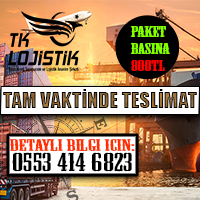
<style>
.page{position:relative;width:200px;height:200px}
.page>*{position:absolute;margin:0}
.t1{font:14px "MesquiteStd";color:#84ff00;scale:1.87 1}
.t2{font:14px "MesquiteStd";color:#ff0000;scale:1.87 1}
.t3{font:20.4px "Impact"}
.t4{font:15.4px "MesquiteStd";color:#ff3000;scale:2.03 1}
.t5{font:24.2px "MesquiteStd";color:#000000;scale:1.77 1}
</style>
<div class="page">
<p class="t1" style="left:130px;top:25px;width:40px;height:46px">PAKET <br>BASINA <br><span class="t2">800TL</span></p>
<p class="t3" style="left:3px;top:89px;width:194px;height:19px">TAM VAKTİNDE TESLİMAT</p>
<p class="t4" style="left:9px;top:138px;width:126px;height:14px">DETAYLI BILGI ICIN:</p>
<p class="t5" style="left:12px;top:152px;width:120px;height:20px">0553 414 6823</p>
</div>
